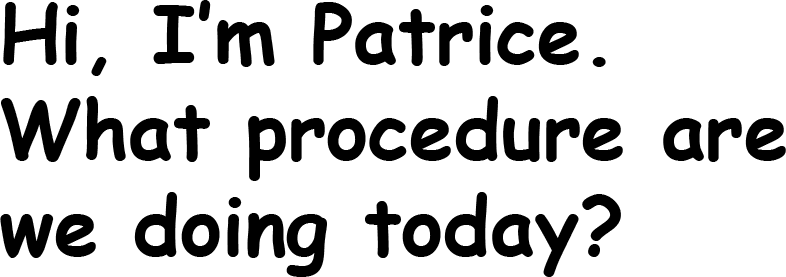
<style>
.page{position:relative;width:786px;height:277px;background:#ffffff}
.page>*{position:absolute;margin:0}
.t1{font:80px "ComicSansMS-Bold";color:#000000}
</style>
<div class="page">
<p class="t1" style="left:0px;top:0px;width:786px;height:277px">Hi, I’m Patrice. <br>What procedure are we doing today?</p>
</div>
